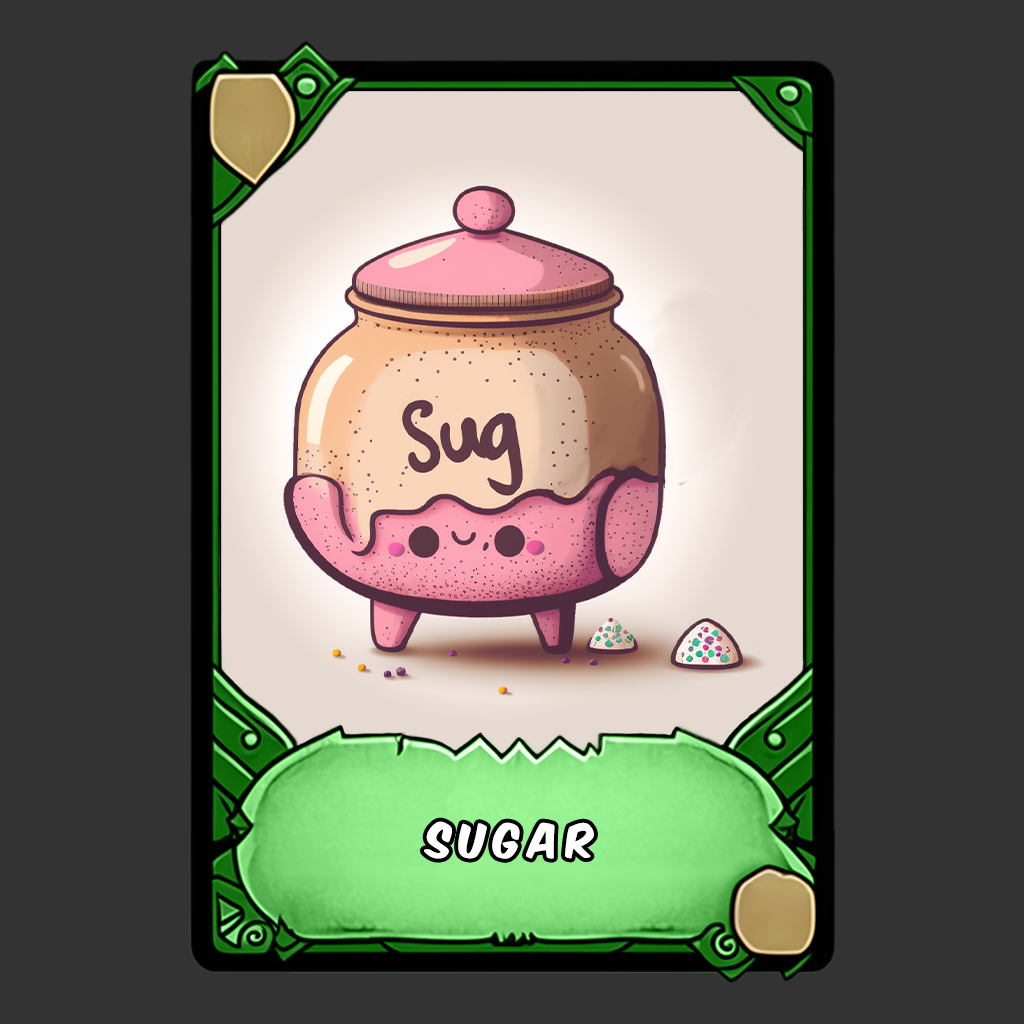
<style>
.page{position:relative;width:1024px;height:1024px;background:#333333}
.page>*{position:absolute;margin:0}
.t1{font:40px "KomikaAxis";letter-spacing:0.2em;color:#ffffff}
</style>
<div class="page">
<p class="t1" style="left:424px;top:821px;width:170px;height:38px">sugar</p>
</div>
